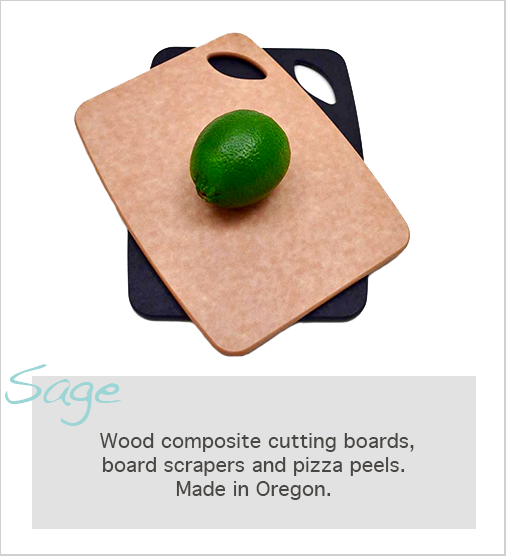
<style>
.page{position:relative;width:506px;height:556px;background:#ffffff}
.page>*{position:absolute;margin:0}
.t1{font:56px "Handwriting-Dakota";color:#9bd5d5}
.t2{font:20px "Geneva";color:#484743}
</style>
<div class="page">
<p class="t1" style="left:5px;top:364px;width:117px;height:62px">Sage</p>
<p class="t2" style="left:100px;top:433px;width:314px;height:67px;text-align:center">Wood composite cutting boards, board scrapers and pizza peels.<br>Made in Oregon.</p>
</div>
